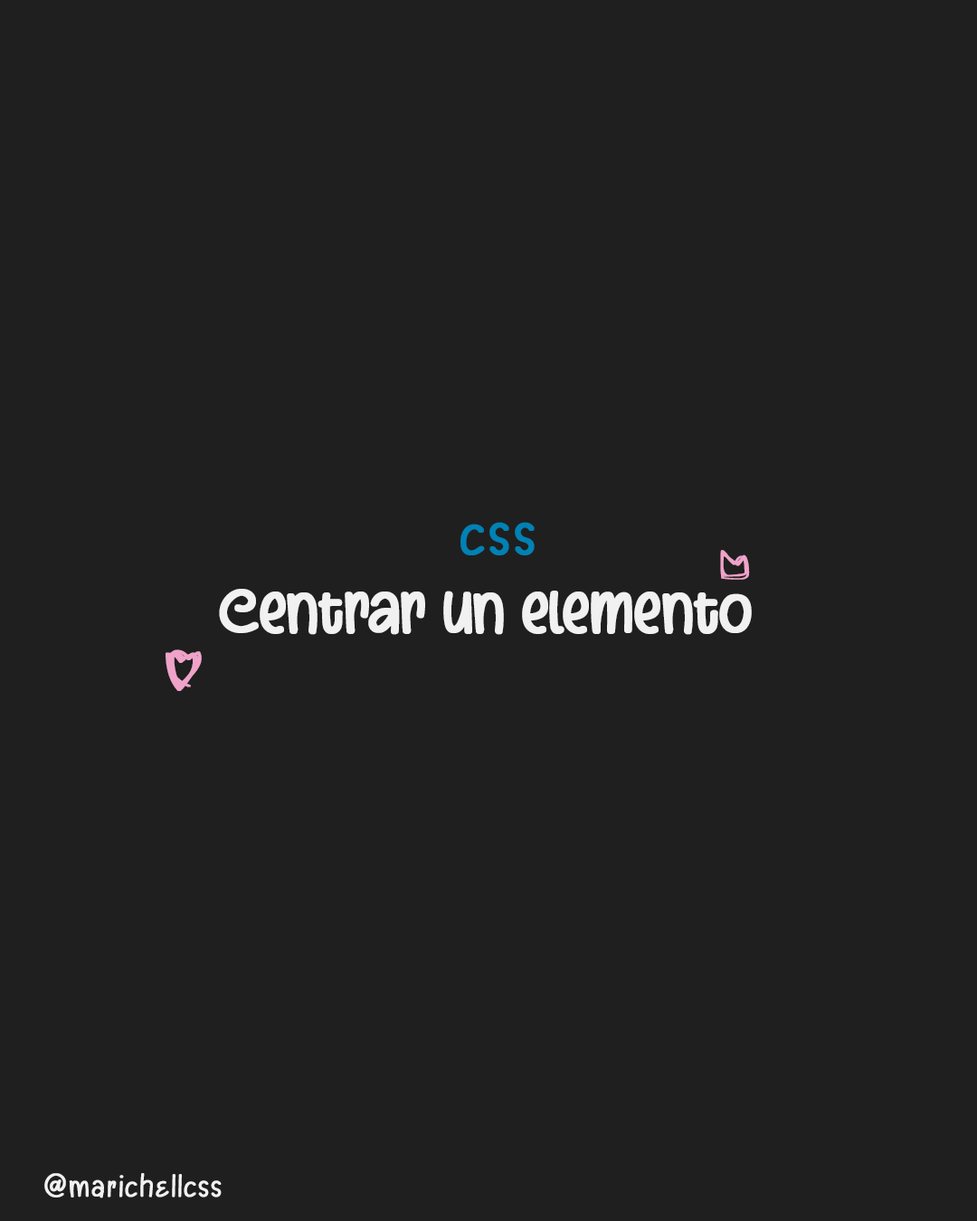
<style>
.page{position:relative;width:977px;height:1221px;background:#1f1f1f}
.page>*{position:absolute;margin:0}
.t1{font:65.1px "KemuningRegular";color:#0081b4;font-weight:bold}
.t2{font:43.4px "DoddleShapes";color:#efa3c8;font-weight:bold}
.t3{font:65.1px "Ravoona";color:#f1f1f1;font-weight:bold}
.t4{font:65.1px "DoddleShapes";color:#efa3c8;font-weight:bold}
.t5{font:32.6px "KemuningRegular";color:#f1f1f1;font-weight:bold}
</style>
<div class="page">
<p class="t1" style="left:460px;top:522px;width:74px;height:33px">css</p>
<p class="t2" style="left:720px;top:550px;width:30px;height:30px">s</p>
<p class="t3" style="left:219px;top:589px;width:533px;height:46px">Centrar un elemento</p>
<p class="t4" style="left:165px;top:649px;width:37px;height:42px">h</p>
<p class="t5" style="left:44px;top:1173px;width:178px;height:25px">@marichellcss</p>
</div>
